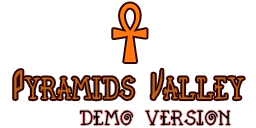
<style>
.page{position:relative;width:256px;height:128px;background:#ffffff}
.page>*{position:absolute;margin:0}
.t1{font:72px "Pegypta";color:#ff7b16}
.t2{font:36px "Pegypta";color:#ba6725;scale:0.85 1}
.t3{font:24px "Pegypta";color:#000000}
</style>
<div class="page">
<p class="t1" style="left:113px;top:3px;width:34px;height:59px">T</p>
<p class="t2" style="left:14px;top:69px;width:230px;height:31px">Pyramids Valley</p>
<p class="t3" style="left:80px;top:110px;width:151px;height:16px">demo version</p>
</div>
